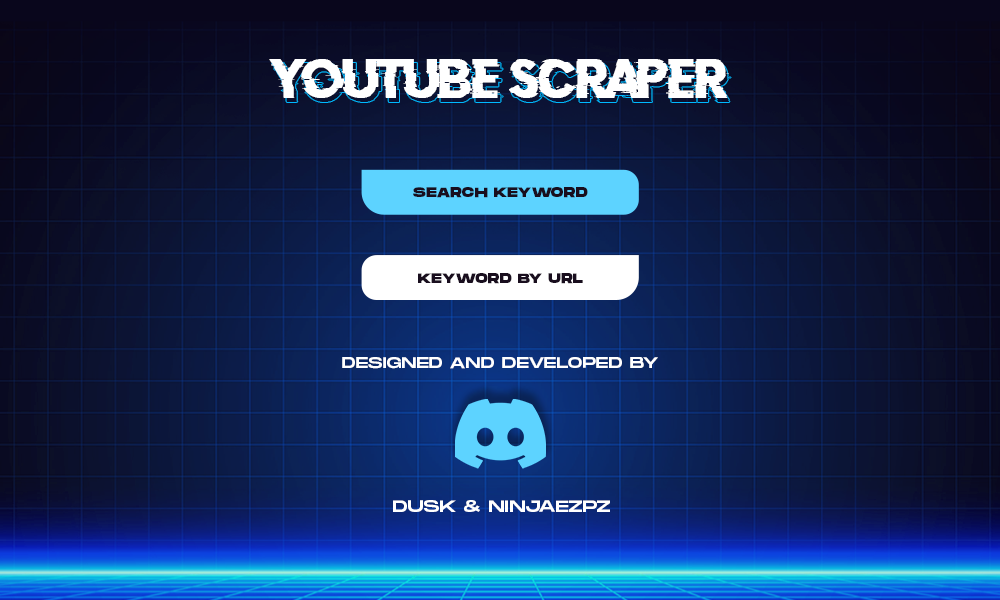
<style>
.page{position:relative;width:1000px;height:600px}
.page>*{position:absolute;margin:0}
.t1{font:43.1px "DoctorGlitch";color:#ffffff;text-transform:uppercase}
.t2{font:13.6px "MonumentExtended-Ultrabold";letter-spacing:0.02em;color:#190e1e;text-transform:uppercase}
.t3{font:15.5px "MonumentExtended-Regular";color:#ffffff;text-transform:uppercase}
.t4{font:16.5px "MonumentExtended-Regular";color:#ffffff;text-transform:uppercase}
</style>
<div class="page">
<p class="t1" style="left:269px;top:59px;width:460px;height:39px">Youtube scraper</p>
<p class="t1" style="left:272px;top:63px;width:459px;height:39px">Youtube scraper</p>
<p class="t2" style="left:413px;top:187px;width:175px;height:11px">Search Keyword</p>
<p class="t2" style="left:418px;top:273px;width:165px;height:11px">Keyword by url</p>
<p class="t3" style="left:342px;top:357px;width:316px;height:12px">designed and developed by</p>
<p class="t4" style="left:393px;top:500px;width:217px;height:12px">Dusk &amp; ninjaezpz</p>
</div>
